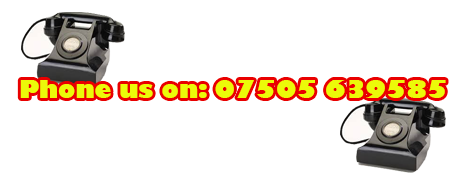
<style>
.page{position:relative;width:454px;height:182px;background:#ffffff}
.page>*{position:absolute;margin:0}
.t1{font:24px "GillSans-UltraBold";color:#ecfa09}
</style>
<div class="page">
<p class="t1" style="left:20px;top:80px;width:426px;height:18px">Phone us on: 07505 639585</p>
</div>
